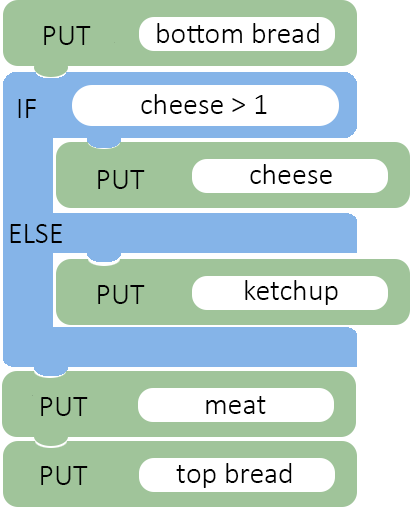
<style>
.page{position:relative;width:410px;height:507px;background:#a0c49a}
.page>*{position:absolute;margin:0}
.t1{font:30px "Calibri-Light";color:#000000}
</style>
<div class="page">
<p class="t1" style="left:44px;top:26px;width:47px;height:19px">PUT</p>
<p class="t1" style="left:157px;top:23px;width:162px;height:20px">bottom bread</p>
<p class="t1" style="left:18px;top:99px;width:18px;height:19px">IF</p>
<p class="t1" style="left:141px;top:94px;width:126px;height:20px">cheese &gt; 1</p>
<p class="t1" style="left:98px;top:170px;width:47px;height:19px">PUT</p>
<p class="t1" style="left:250px;top:164px;width:82px;height:20px">cheese</p>
<p class="t1" style="left:10px;top:224px;width:52px;height:19px">ELSE</p>
<p class="t1" style="left:245px;top:280px;width:93px;height:25px">ketchup</p>
<p class="t1" style="left:98px;top:285px;width:47px;height:19px">PUT</p>
<p class="t1" style="left:41px;top:397px;width:47px;height:19px">PUT</p>
<p class="t1" style="left:206px;top:396px;width:60px;height:18px">meat</p>
<p class="t1" style="left:41px;top:466px;width:47px;height:19px">PUT</p>
<p class="t1" style="left:176px;top:463px;width:116px;height:25px">top bread</p>
</div>
